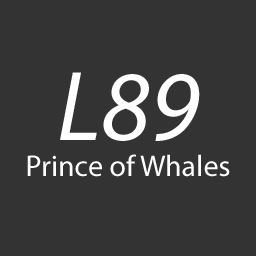
<style>
.page{position:relative;width:256px;height:256px;background:#333333}
.page>*{position:absolute;margin:0}
.t1{font:30px "MyriadPro-Regular";color:#ffffff}
.t2{font:100px "MyriadPro-It";color:#ffffff}
</style>
<div class="page">
<p class="t1" style="left:27px;top:72px;width:203px;height:105px;text-align:center"><span class="t2">L89<br></span>Prince of Whales</p>
</div>
